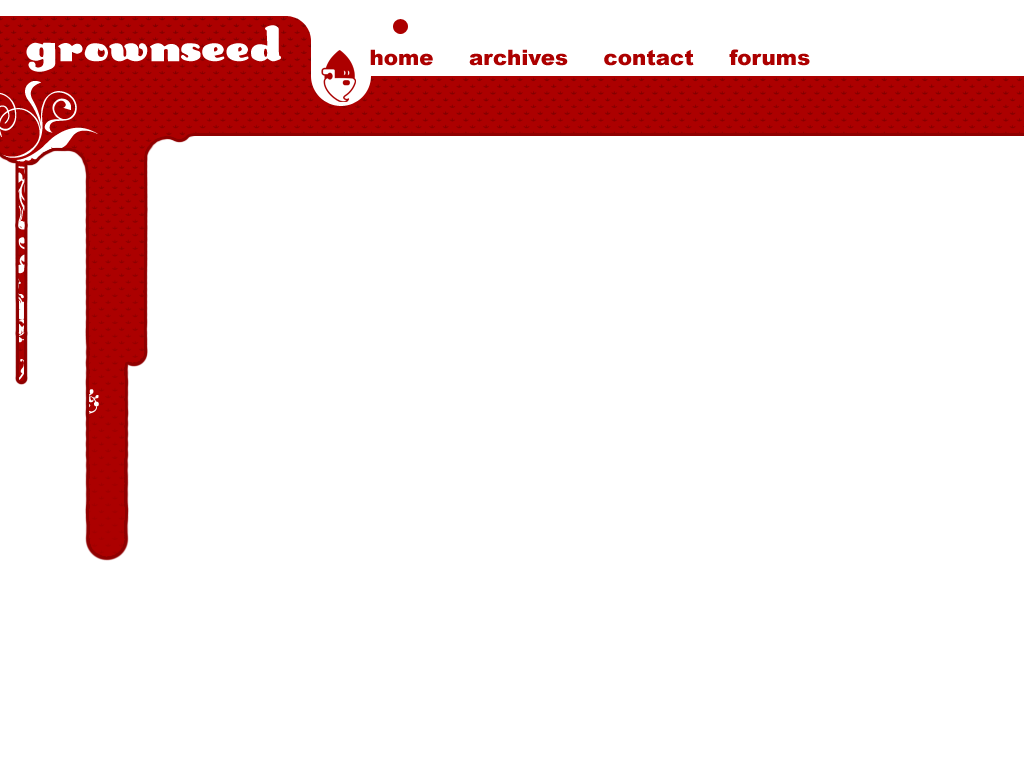
<style>
.page{position:relative;width:1024px;height:768px;background:#ffffff}
.page>*{position:absolute;margin:0}
.t1{font:96px "Smoke";color:#ffffff}
.t2{font:21.3px "Arial-Black";color:#ac0000}
</style>
<div class="page">
<p class="t1" style="left:26px;top:25px;width:255px;height:47px">grownSeed</p>
<p class="t2" style="left:370px;top:49px;width:440px;height:17px">home     archives     contact     forums</p>
</div>
